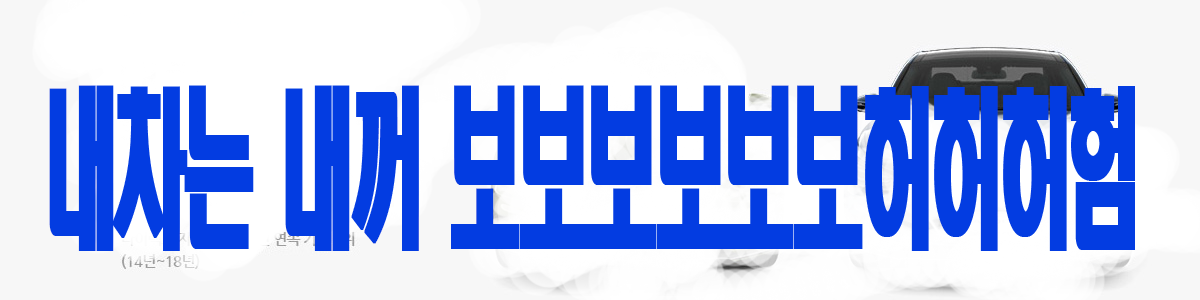
<style>
.page{position:relative;width:1200px;height:300px;background:#033ce1}
.page>*{position:absolute;margin:0}
.t1{font:170.8px "HeadlineR-HM";letter-spacing:-0.12em;color:#033ce1;font-weight:bold;scale:0.44 1}
</style>
<div class="page">
<p class="t1" style="left:49px;top:85px;width:1086px;height:166px">내차는 내꺼 보보보보보보허허허험</p>
</div>
